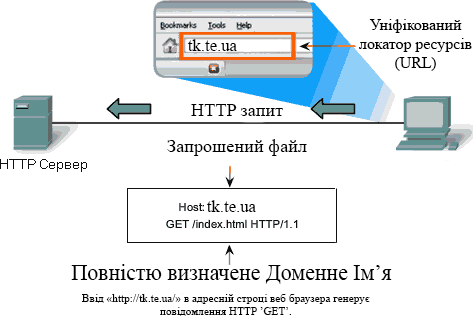
<style>
.page{position:relative;width:473px;height:317px;background:#ffffff}
.page>*{position:absolute;margin:0}
.t1{font:15.8px "TimesNewRomanPSMT";color:#000000}
.t2{font:16.7px "TimesNewRomanPSMT";color:#000000}
.t3{font:18.3px "TimesNewRomanPSMT";color:#000000}
.t4{font:21.8px "TimesNewRomanPSMT";color:#000000}
.t5{font:11.3px "TimesNewRomanPSMT";color:#000000}
</style>
<div class="page">
<p class="t1" style="left:359px;top:19px;width:113px;height:52px;text-align:center">Уніфікований<br>локатор ресурсів<br>(URL)</p>
<p class="t2" style="left:187px;top:39px;width:50px;height:12px">tk.te.ua</p>
<p class="t3" style="left:191px;top:104px;width:92px;height:12px">HTTP запит</p>
<p class="t3" style="left:167px;top:139px;width:140px;height:17px">Запрошений файл</p>
<p class="t2" style="left:206px;top:200px;width:50px;height:12px">tk.te.ua</p>
<p class="t4" style="left:71px;top:264px;width:321px;height:20px">Повністю визначене Доменне Ім’я</p>
<p class="t5" style="left:82px;top:294px;width:288px;height:22px;text-align:center">Ввід «http://tk.te.ua/» в адресній строці веб браузера генерує<br>повідомлення HTTP ’GET’.</p>
</div>
